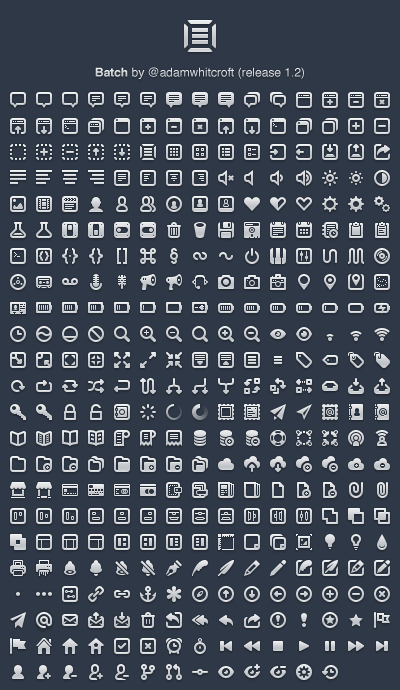
<style>
.page{position:relative;width:400px;height:690px;background:#2e3846}
.page>*{position:absolute;margin:0}
.t1{font:12px "Helvetica";color:#dddfe1}
.t2{font:12px "Helvetica-Bold";color:#dddfe1}
</style>
<div class="page">
<p class="t1" style="left:95px;top:67px;width:209px;height:12px"><span class="t2">Batch</span> by @adamwhitcroft (release 1.2)</p>
</div>
